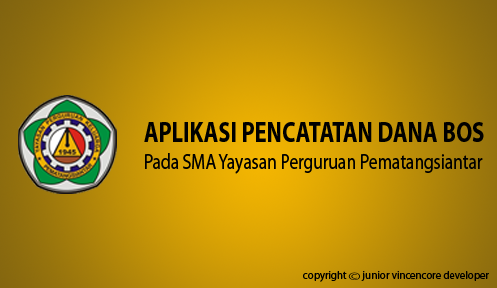
<style>
.page{position:relative;width:497px;height:288px}
.page>*{position:absolute;margin:0}
.t1{font:22.3px "MyriadPro-Regular";color:#000000;scale:0.78 1}
.t2{font:28.8px "MyriadPro-Bold";color:#000000;scale:0.78 1}
.t3{font:10.8px "MyriadPro-Regular";color:#000000}
</style>
<div class="page">
<p class="t1" style="left:144px;top:122px;width:340px;height:52px"><span class="t2">APLIKASI PENCATATAN DANA BOS<br></span>Pada SMA Yayasan Perguruan Pematangsiantar</p>
<p class="t3" style="left:303px;top:271px;width:186px;height:11px">copyright       junior vincencore developer</p>
</div>
